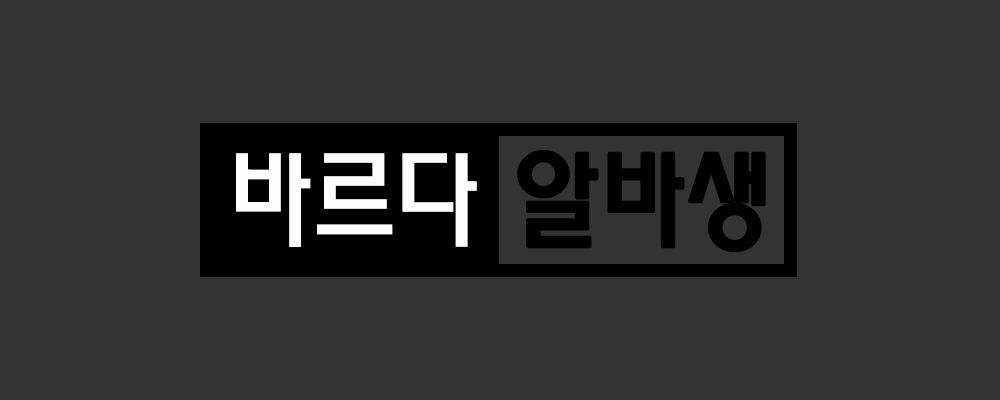
<style>
.page{position:relative;width:1000px;height:400px;background:#333333}
.page>*{position:absolute;margin:0}
.t1{font:105.8px "MoeumTR-HM";letter-spacing:-0.03em;color:#fefefe}
.t2{font:105.8px "MoeumTR-HM";letter-spacing:-0.03em;color:#000000;font-weight:bold}
</style>
<div class="page">
<p class="t1" style="left:236px;top:150px;width:530px;height:103px">바르다 <span class="t2">알바생</span></p>
</div>
